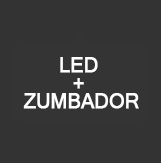
<style>
.page{position:relative;width:161px;height:163px;background:#333333}
.page>*{position:absolute;margin:0}
.t1{font:20px/18px "MicrosoftSansSerif";letter-spacing:-0.02em;color:#fefefe;font-weight:bold}
</style>
<div class="page">
<p class="t1" style="left:23px;top:57px;width:116px;height:52px;text-align:center">LED <br>+ <br>ZUMBADOR</p>
</div>
